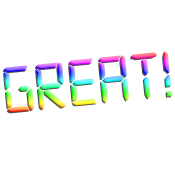
<style>
.page{position:relative;width:175px;height:175px;background:#ffffff}
.page>*{position:absolute;margin:0}
.t1{font:69px "Digital-7"}
</style>
<div class="page">
<p class="t1" style="left:4px;top:51px;width:168px;height:62px;rotate:-6deg">GREAT!</p>
</div>
